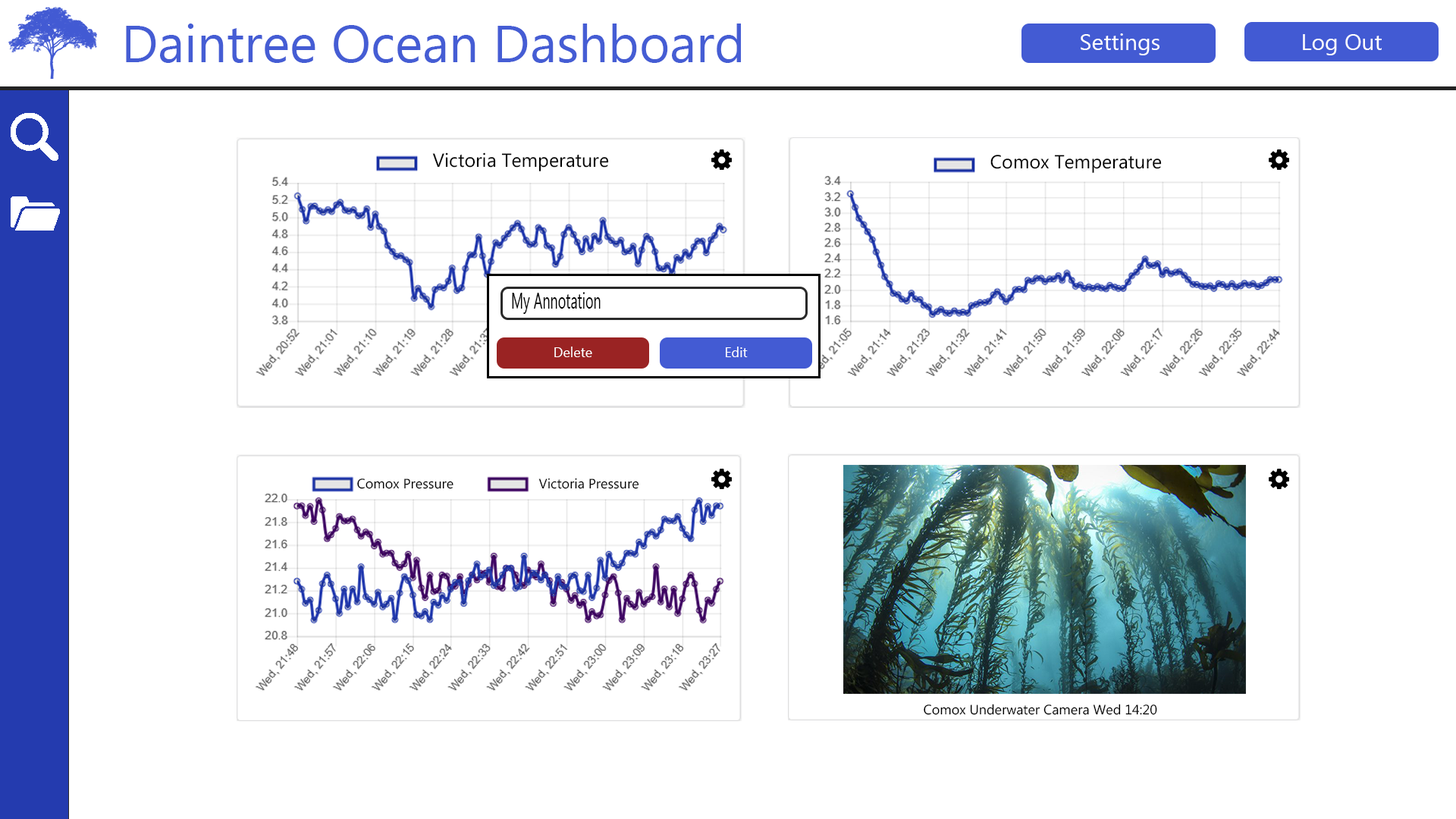
<style>
.page{position:relative;width:1456px;height:819px;background:#ffffff}
.page>*{position:absolute;margin:0}
.t1{font:52.3px "MyanmarText";color:#455dd4}
.t2{font:22.7px "MyanmarText";color:#ffffff}
.t3{font:19px "MyanmarText";color:#000000}
.t4{font:22.7px "MyanmarText";color:#000000;scale:0.6 1}
.t5{font:13.7px "MyanmarText";color:#ffffff}
.t6{font:13.6px "MyanmarText";color:#000000}
</style>
<div class="page">
<p class="t1" style="left:126px;top:24px;width:615px;height:39px">Daintree Ocean Dashboard</p>
<p class="t2" style="left:1081px;top:33px;width:78px;height:22px">Settings</p>
<p class="t2" style="left:1303px;top:34px;width:79px;height:21px">Log Out</p>
<p class="t3" style="left:432px;top:152px;width:177px;height:19px">Victoria Temperature</p>
<p class="t3" style="left:990px;top:155px;width:172px;height:18px">Comox Temperature</p>
<p class="t4" style="left:512px;top:292px;width:89px;height:22px">My Annotation</p>
<p class="t5" style="left:554px;top:347px;width:38px;height:10px">Delete</p>
<p class="t5" style="left:726px;top:347px;width:22px;height:10px">Edit</p>
<p class="t6" style="left:357px;top:479px;width:96px;height:10px">Comox Pressure</p>
<p class="t6" style="left:538px;top:478px;width:101px;height:11px">Victoria Pressure</p>
<p class="t6" style="left:924px;top:704px;width:233px;height:11px">Comox Underwater Camera Wed 14:20</p>
</div>
